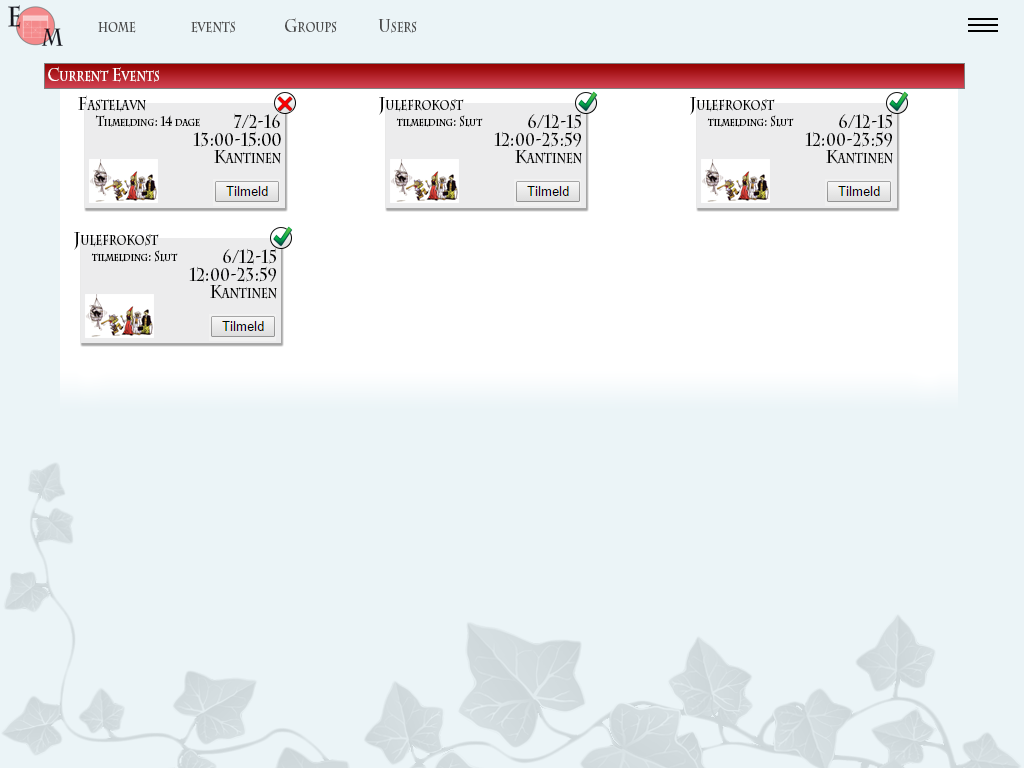
<style>
.page{position:relative;width:1024px;height:768px;background:#ebf4f7}
.page>*{position:absolute;margin:0}
.t1{font:18.4px "CharlemagneStd-Bold";color:#4b4b4b;font-variant:small-caps;scale:0.81 1}
.t2{font:18.4px "CharlemagneStd-Bold";color:#ffffff;font-variant:small-caps;scale:0.81 1}
.t3{font:18.4px "CharlemagneStd-Bold";color:#000000;font-variant:small-caps;scale:0.81 1}
.t4{font:13.5px "CharlemagneStd-Bold";color:#000000;font-variant:small-caps;scale:0.81 1}
</style>
<div class="page">
<p class="t1" style="left:285px;top:17px;width:52px;height:16px">Groups</p>
<p class="t1" style="left:98px;top:21px;width:38px;height:12px">home</p>
<p class="t1" style="left:191px;top:21px;width:44px;height:12px">events</p>
<p class="t1" style="left:378px;top:19px;width:39px;height:14px">Users</p>
<p class="t2" style="left:48px;top:66px;width:111px;height:17px">Current Events</p>
<p class="t3" style="left:78px;top:95px;width:68px;height:17px">Fastelavn</p>
<p class="t3" style="left:379px;top:97px;width:85px;height:18px">Julefrokost</p>
<p class="t3" style="left:690px;top:97px;width:85px;height:18px">Julefrokost</p>
<p class="t3" style="left:234px;top:113px;width:46px;height:17px">7/2-16</p>
<p class="t3" style="left:528px;top:113px;width:53px;height:17px">6/12-15</p>
<p class="t3" style="left:839px;top:113px;width:53px;height:17px">6/12-15</p>
<p class="t4" style="left:95px;top:115px;width:105px;height:12px">Tilmelding: 14 dage</p>
<p class="t4" style="left:396px;top:115px;width:87px;height:12px">tilmelding: Slut</p>
<p class="t4" style="left:707px;top:115px;width:87px;height:12px">tilmelding: Slut</p>
<p class="t3" style="left:193px;top:131px;width:88px;height:16px">13:00-15:00</p>
<p class="t3" style="left:494px;top:131px;width:87px;height:17px">12:00-23:59</p>
<p class="t3" style="left:805px;top:131px;width:87px;height:17px">12:00-23:59</p>
<p class="t3" style="left:214px;top:149px;width:67px;height:15px">Kantinen</p>
<p class="t3" style="left:515px;top:149px;width:67px;height:15px">Kantinen</p>
<p class="t3" style="left:826px;top:149px;width:67px;height:15px">Kantinen</p>
<p class="t3" style="left:74px;top:232px;width:85px;height:18px">Julefrokost</p>
<p class="t4" style="left:91px;top:250px;width:87px;height:12px">tilmelding: Slut</p>
<p class="t3" style="left:223px;top:248px;width:53px;height:17px">6/12-15</p>
<p class="t3" style="left:189px;top:266px;width:87px;height:17px">12:00-23:59</p>
<p class="t3" style="left:210px;top:284px;width:67px;height:15px">Kantinen</p>
</div>
